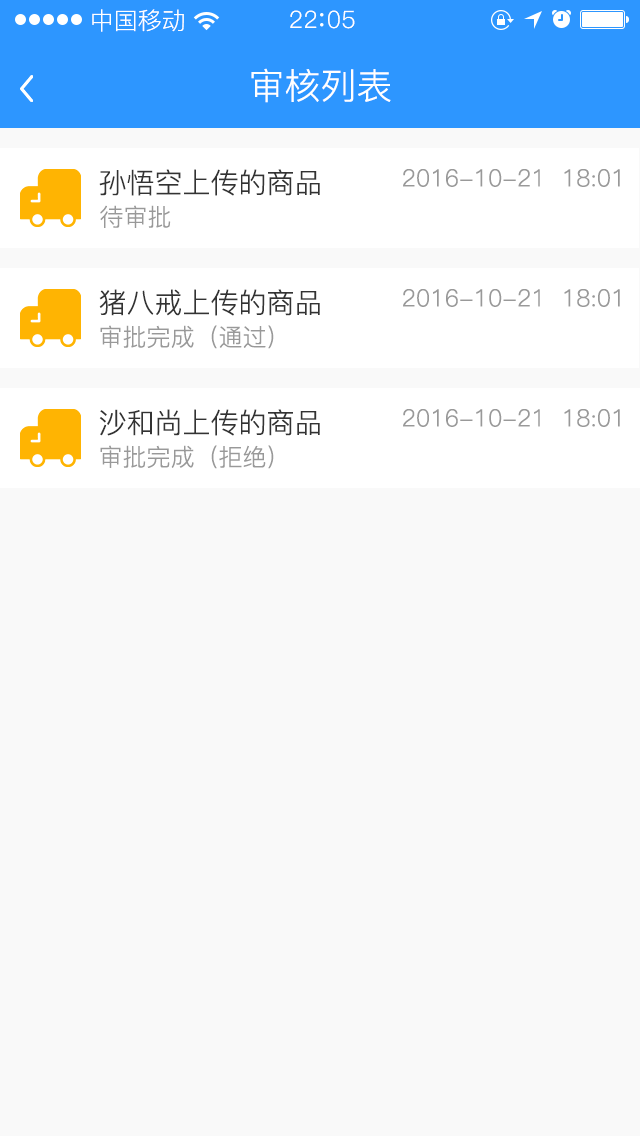
<style>
.page{position:relative;width:640px;height:1136px;background:#f9f9f9}
.page>*{position:absolute;margin:0}
.t1{font:24px "PingFang-SC-Regular";color:#ffffff}
.t2{font:24px "PingFang-SC-Regular";letter-spacing:0.03em;color:#ffffff}
.t3{font:36px "PingFang-SC-Regular";color:#ffffff}
.t4{font:28px "PingFang-SC-Regular";color:#333333}
.t5{font:24px "PingFang-SC-Regular";color:#999999}
</style>
<div class="page">
<p class="t1" style="left:92px;top:9px;width:92px;height:23px">中国移动</p>
<p class="t2" style="left:290px;top:10px;width:65px;height:19px">22 05</p>
<p class="t3" style="left:251px;top:68px;width:140px;height:35px">审核列表</p>
<p class="t4" style="left:99px;top:169px;width:221px;height:27px">孙悟空上传的商品</p>
<p class="t5" style="left:403px;top:169px;width:217px;height:18px">2016-10-21  18:01</p>
<p class="t5" style="left:100px;top:205px;width:71px;height:23px">待审批</p>
<p class="t4" style="left:99px;top:289px;width:221px;height:27px">猪八戒上传的商品</p>
<p class="t5" style="left:403px;top:289px;width:217px;height:18px">2016-10-21  18:01</p>
<p class="t5" style="left:100px;top:325px;width:174px;height:24px">审批完成（通过）</p>
<p class="t4" style="left:99px;top:409px;width:221px;height:27px">沙和尚上传的商品</p>
<p class="t5" style="left:403px;top:409px;width:217px;height:18px">2016-10-21  18:01</p>
<p class="t5" style="left:100px;top:445px;width:174px;height:24px">审批完成（拒绝）</p>
</div>
